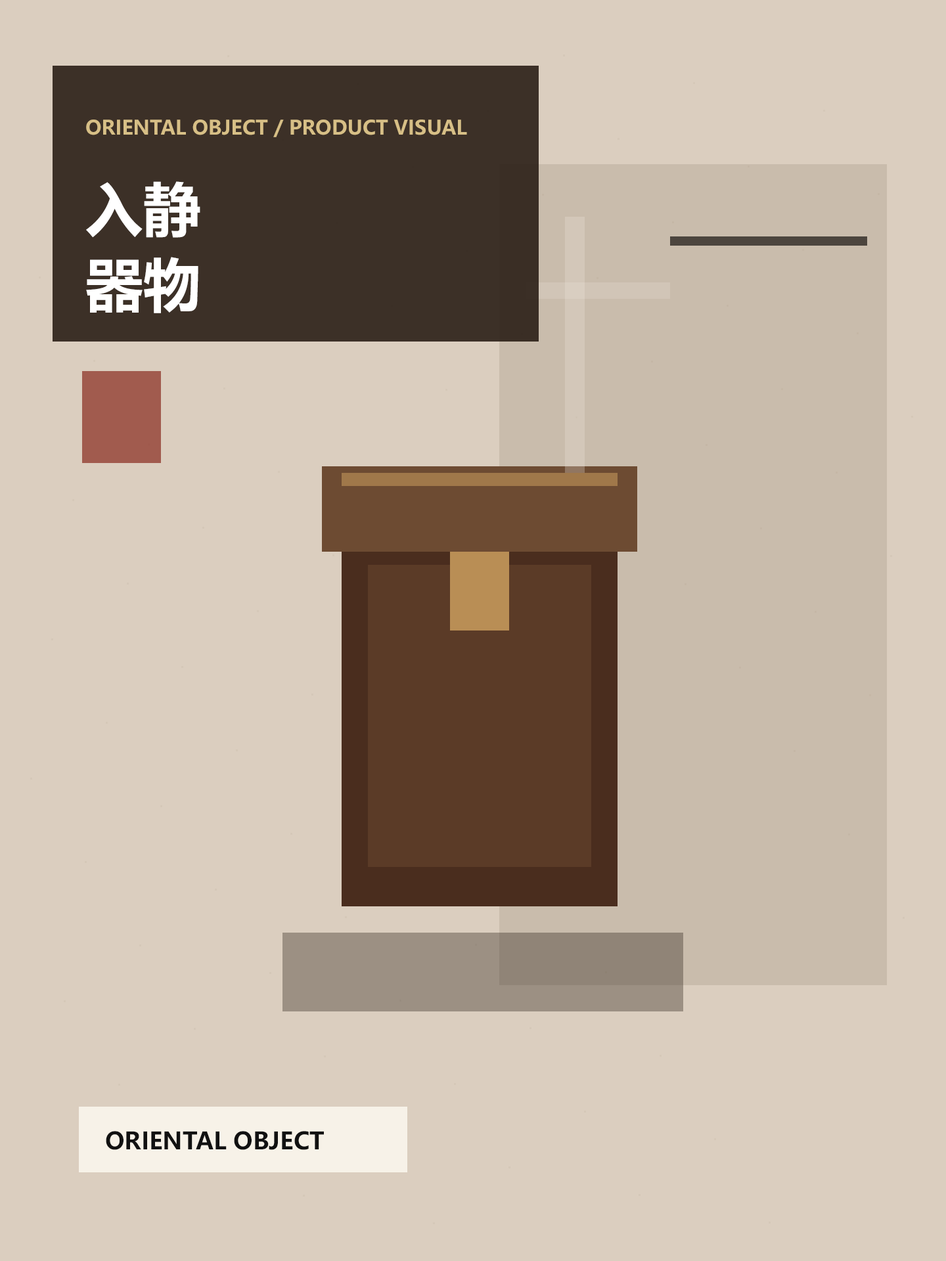
<style>
.page{position:relative;width:946px;height:1261px;background:#dbcebf}
.page>*{position:absolute;margin:0}
.t1{font:19.7px "MicrosoftYaHeiUI-Bold";color:#d7bf86}
.t2{font:57.8px "MicrosoftYaHeiUI-Bold";color:#ffffff}
.t3{font:23.6px "MicrosoftYaHeiUI-Bold";color:#111111}
</style>
<div class="page">
<p class="t1" style="left:86px;top:120px;width:381px;height:17px">ORIENTAL OBJECT / PRODUCT VISUAL</p>
<p class="t2" style="left:86px;top:181px;width:114px;height:57px">入静</p>
<p class="t2" style="left:86px;top:257px;width:112px;height:56px">器物</p>
<p class="t3" style="left:106px;top:1131px;width:218px;height:19px">ORIENTAL OBJECT</p>
</div>
